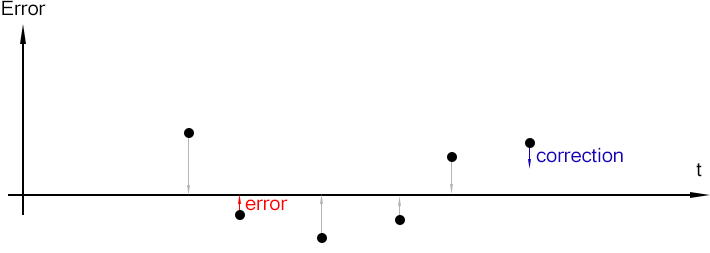
<style>
.page{position:relative;width:710px;height:253px;background:#ffffff}
.page>*{position:absolute;margin:0}
.t1{font:20px "MicrosoftSansSerif";color:#000000}
.t2{font:20px "MicrosoftSansSerif";color:#1600b9}
.t3{font:20px "MicrosoftSansSerif";color:#ff0000}
</style>
<div class="page">
<p class="t1" style="left:2px;top:0px;width:44px;height:16px">Error</p>
<p class="t2" style="left:536px;top:147px;width:87px;height:16px">correction</p>
<p class="t1" style="left:696px;top:163px;width:6px;height:14px">t</p>
<p class="t3" style="left:245px;top:199px;width:43px;height:12px">error</p>
</div>
